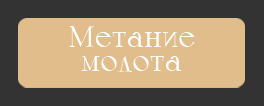
<style>
.page{position:relative;width:264px;height:106px;background:#e0bd8b}
.page>*{position:absolute;margin:0}
.t1{font:30px/24px "Calypso-Regular";color:#ffffff}
</style>
<div class="page">
<p class="t1" style="left:69px;top:26px;width:126px;height:46px;text-align:center">Метание<br>молота</p>
</div>
